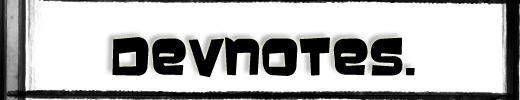
<style>
.page{position:relative;width:520px;height:100px;background:#ffffff}
.page>*{position:absolute;margin:0}
.t1{font:44px "Baveuse";color:#000000;font-weight:bold}
</style>
<div class="page">
<p class="t1" style="left:112px;top:37px;width:303px;height:41px">devnotes.</p>
</div>
